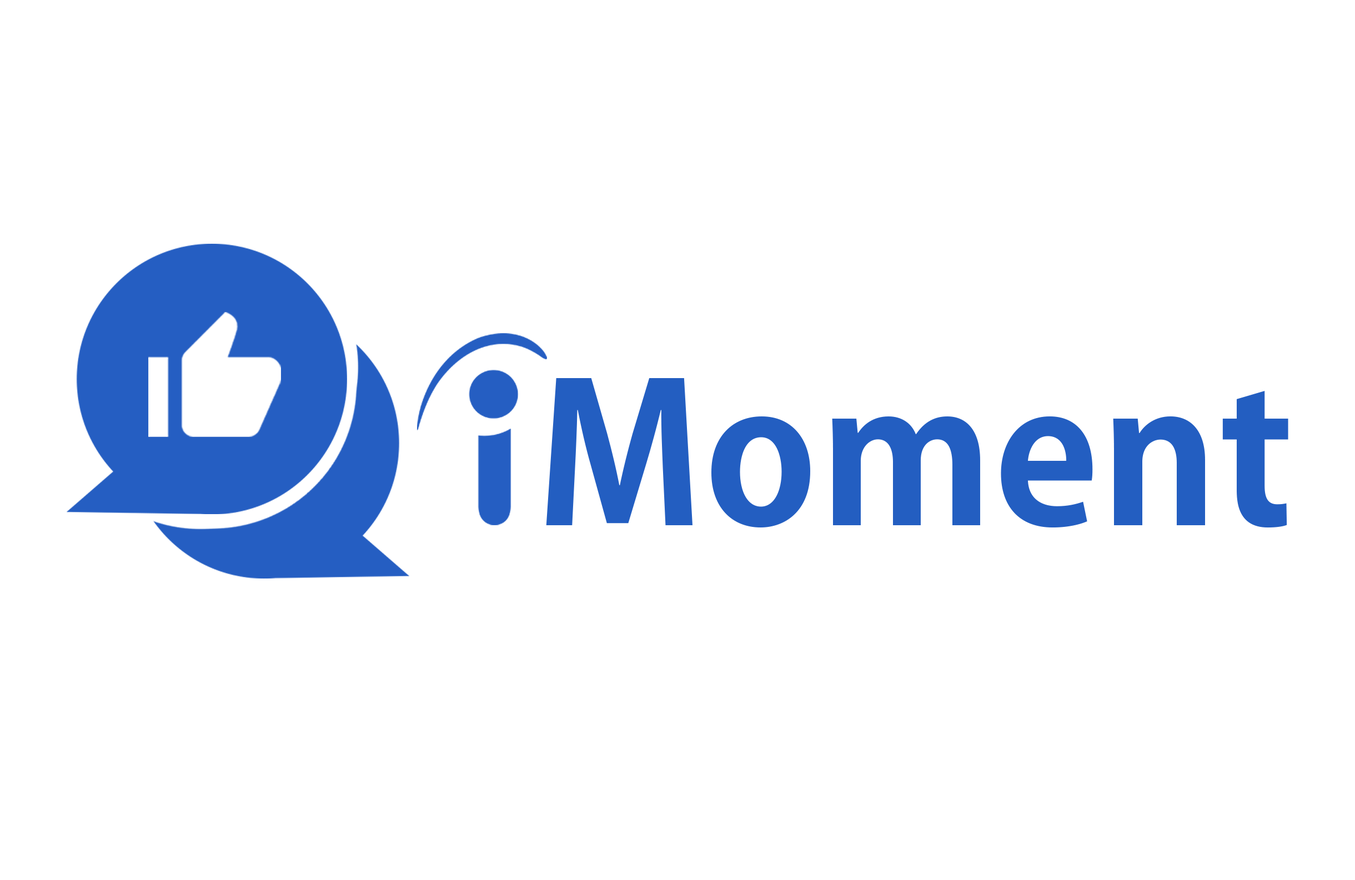
<style>
.page{position:relative;width:1355px;height:880px;background:#ffffff}
.page>*{position:absolute;margin:0}
.t1{font:191.1px "KozGoPr6N-Bold";letter-spacing:0.01em;color:#235ec1}
</style>
<div class="page">
<p class="t1" style="left:546px;top:378px;width:742px;height:150px">Moment</p>
</div>
